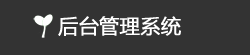
<style>
.page{position:relative;width:250px;height:55px;background:#333333}
.page>*{position:absolute;margin:0}
.t1{font:20px "MicrosoftYaHei";color:#ffffff;font-weight:bold}
</style>
<div class="page">
<p class="t1" style="left:58px;top:16px;width:123px;height:20px">后台管理系统</p>
</div>
